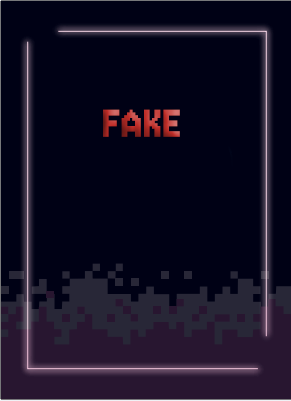
<style>
.page{position:relative;width:291px;height:401px;background:#000115}
.page>*{position:absolute;margin:0}
.t1{font:50px "Jersey10-Regular";letter-spacing:0.025em}
</style>
<div class="page">
<p class="t1" style="left:103px;top:109px;width:77px;height:28px">FAKE</p>
</div>
